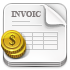
<style>
.page{position:relative;width:70px;height:70px}
.page>*{position:absolute;margin:0}
.t1{font:8px "TimesNewRomanPS-BoldMT";color:#817b7b}
.t2{font:14px "TimesNewRomanPS-BoldMT";color:#634712}
</style>
<div class="page">
<p class="t1" style="left:11px;top:11px;width:30px;height:6px">INVOIC</p>
<p class="t2" style="left:9px;top:34px;width:7px;height:12px">$</p>
</div>
